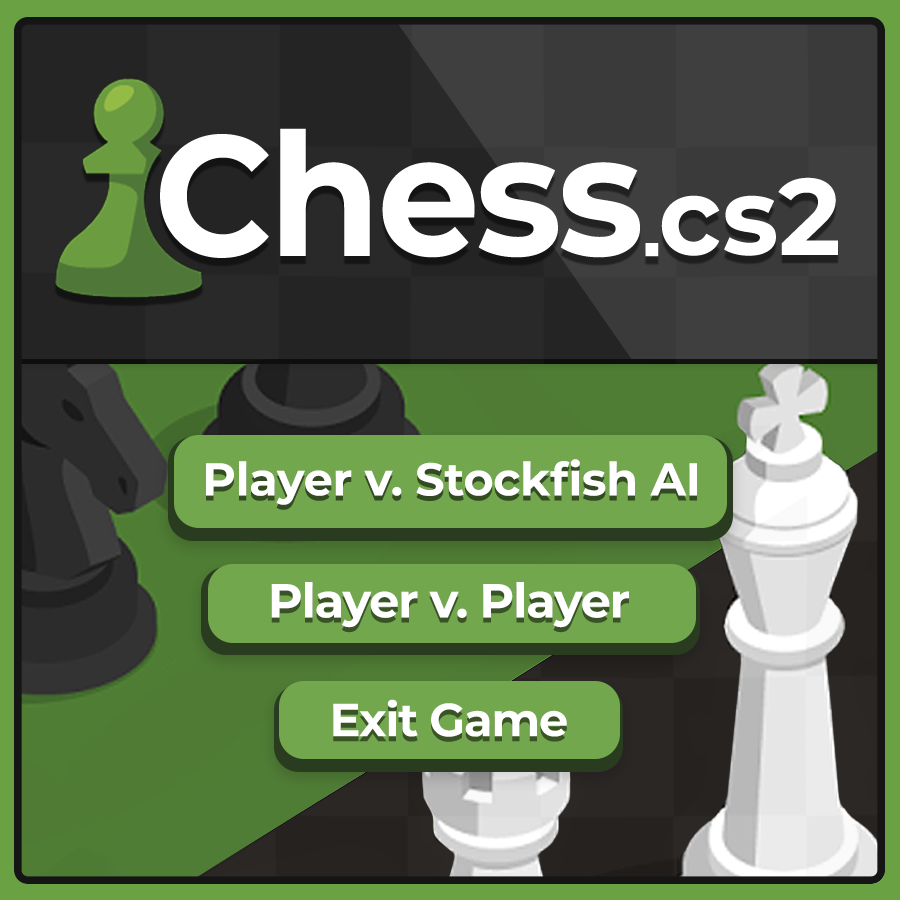
<style>
.page{position:relative;width:900px;height:900px}
.page>*{position:absolute;margin:0}
.t1{font:171px "MontserratRoman-Bold";letter-spacing:-0.025em;color:#ffffff;scale:0.95 1}
.t2{font:107.9px "MontserratRoman-Bold";letter-spacing:0.01em;color:#ffffff}
.t3{font:96.8px "Arial-BoldMT";letter-spacing:0.01em;color:#ffffff;scale:0.97 1}
.t4{font:46px "Montserrat-Bold";letter-spacing:-0.005em;color:#ffffff}
.t5{font:47.8px "Montserrat-Bold";letter-spacing:-0.025em;color:#ffffff}
.t6{font:46.5px "MontserratRoman-Bold";letter-spacing:-0.025em;color:#ffffff}
</style>
<div class="page">
<p class="t1" style="left:160px;top:128px;width:480px;height:130px">Chess</p>
<p class="t2" style="left:661px;top:177px;width:177px;height:79px">cs2</p>
<p class="t3" style="left:645px;top:243px;width:14px;height:14px">.</p>
<p class="t4" style="left:206px;top:459px;width:491px;height:46px">Player v. Stockfish AI</p>
<p class="t5" style="left:271px;top:582px;width:358px;height:46px">Player v. Player</p>
<p class="t6" style="left:333px;top:699px;width:234px;height:38px">Exit Game</p>
</div>
